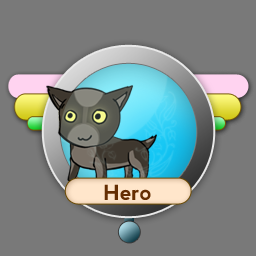
<style>
.page{position:relative;width:256px;height:256px;background:#797979}
.page>*{position:absolute;margin:0}
.t1{font:20.8px "nevis-Bold";color:#652e02}
</style>
<div class="page">
<p class="t1" style="left:104px;top:184px;width:47px;height:16px">Hero</p>
</div>
